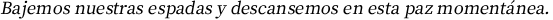
<style>
.page{position:relative;width:553px;height:20px;background:#ffffff}
.page>*{position:absolute;margin:0}
.t1{font:20px "OfficialFateFont-Medium";color:#000000;font-style:italic}
</style>
<div class="page">
<p class="t1" style="left:0px;top:0px;width:549px;height:19px">Bajemos nuestras espadas y descansemos en esta paz momentánea.</p>
</div>
